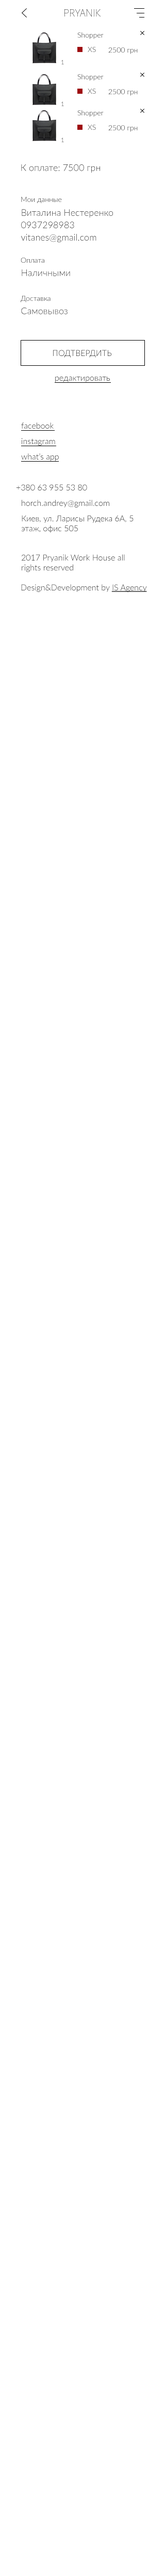
<style>
.page{position:relative;width:165px;height:2576px;background:#ffffff}
.page>*{position:absolute;margin:0}
.t1{font:7.2px "Lato-Light"}
.t2{font:6.2px "Lato-Light"}
.t3{font:9.3px "Lato-Light";color:#000000}
.t4{font:9.3px/12.4px "Lato-Light";color:#000000}
.t5{font:9.3px "Lato-Light"}
.t6{font:8.2px "Lato-Light";color:#010000;text-transform:uppercase}
.t7{font:8.2px "Lato-Light"}
.t8{font:8.2px "Lato-Light";color:#000000}
.t9{font:8.2px "Lato-Light";color:#000000;text-decoration:underline}
</style>
<div class="page">
<p class="t1" style="left:77px;top:32px;width:27px;height:7px">Shopper</p>
<p class="t1" style="left:88px;top:47px;width:8px;height:5px">XS</p>
<p class="t1" style="left:108px;top:47px;width:30px;height:7px">2500 грн</p>
<p class="t2" style="left:61px;top:60px;width:3px;height:4px">1</p>
<p class="t1" style="left:77px;top:74px;width:27px;height:7px">Shopper</p>
<p class="t1" style="left:88px;top:89px;width:8px;height:5px">XS</p>
<p class="t1" style="left:108px;top:89px;width:30px;height:7px">2500 грн</p>
<p class="t2" style="left:61px;top:101px;width:3px;height:5px">1</p>
<p class="t1" style="left:77px;top:110px;width:27px;height:7px">Shopper</p>
<p class="t1" style="left:88px;top:125px;width:8px;height:5px">XS</p>
<p class="t1" style="left:108px;top:125px;width:30px;height:7px">2500 грн</p>
<p class="t2" style="left:61px;top:138px;width:3px;height:4px">1</p>
<p class="t3" style="left:21px;top:164px;width:79px;height:9px">К оплате: 7500 грн</p>
<p class="t1" style="left:21px;top:197px;width:41px;height:7px">Мои данные</p>
<p class="t4" style="left:21px;top:209px;width:92px;height:34px">Виталина Нестеренко<br>0937298983<br>vitanes@gmail.com</p>
<p class="t1" style="left:21px;top:258px;width:23px;height:5px">Оплата</p>
<p class="t3" style="left:22px;top:269px;width:48px;height:7px">Наличными</p>
<p class="t1" style="left:21px;top:296px;width:29px;height:6px">Доставка</p>
<p class="t5" style="left:21px;top:308px;width:46px;height:6px">Самовывоз</p>
<p class="t6" style="left:53px;top:350px;width:58px;height:8px">Подтвердить</p>
<p class="t7" style="left:55px;top:377px;width:55px;height:5px">редактировать</p>
<p class="t7" style="left:21px;top:422px;width:33px;height:7px">facebook</p>
<p class="t7" style="left:22px;top:438px;width:33px;height:8px">instagram</p>
<p class="t7" style="left:21px;top:453px;width:38px;height:8px">what’s app</p>
<p class="t7" style="left:16px;top:484px;width:71px;height:6px">+380 63 955 53 80</p>
<p class="t7" style="left:22px;top:500px;width:87px;height:7px">horch.andrey@gmail.com</p>
<p class="t8" style="left:21px;top:515px;width:112px;height:18px">Киев, ул. Ларисы Рудека 6А, 5 этаж, офис 505</p>
<p class="t8" style="left:22px;top:554px;width:103px;height:18px">2017 Pryanik Work House all rights reserved</p>
<p class="t8" style="left:21px;top:584px;width:126px;height:8px">Design&amp;Development by <span class="t9">IS Agency</span></p>
</div>
